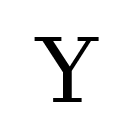
<style>
.page{position:relative;width:128px;height:128px;background:#ffffff}
.page>*{position:absolute;margin:0}
.t1{font:92px "JavaneseText";color:#000000}
</style>
<div class="page">
<p class="t1" style="left:34px;top:37px;width:65px;height:65px">Y</p>
</div>
